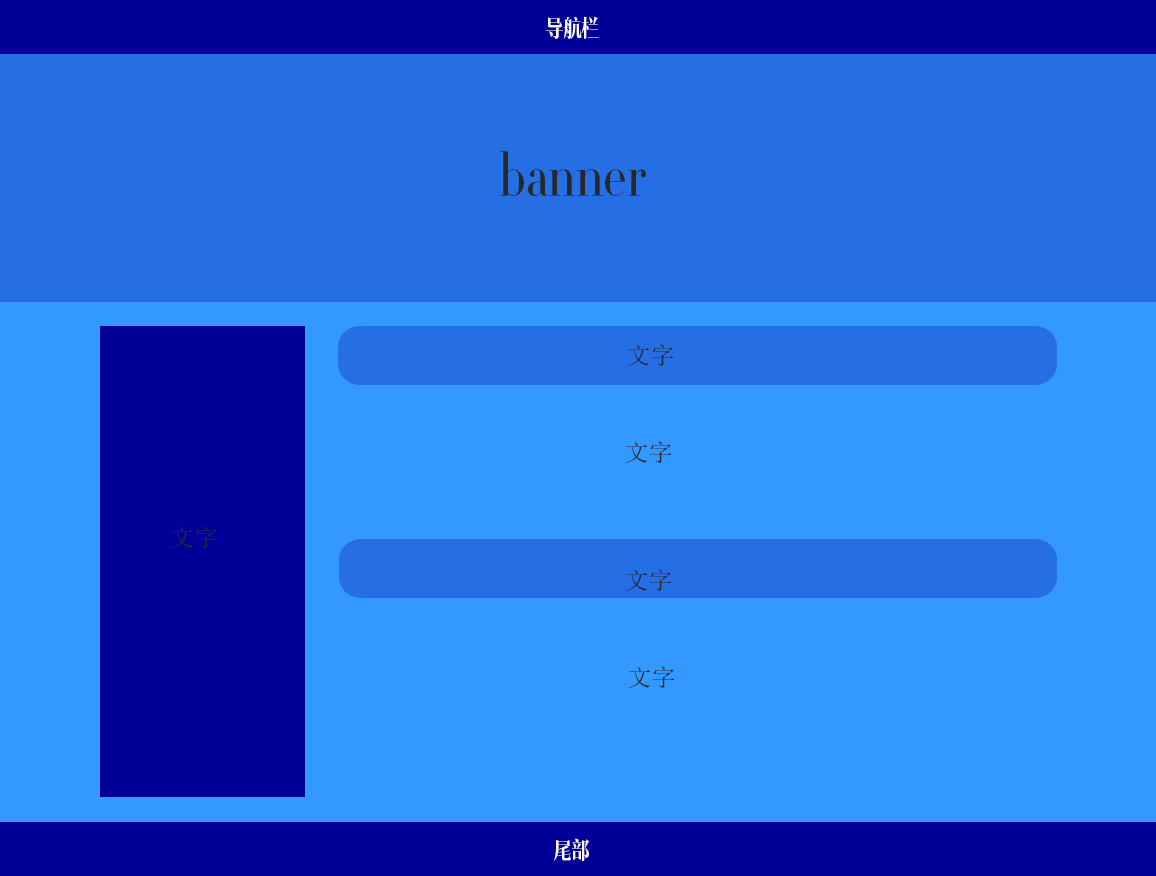
<style>
.page{position:relative;width:1156px;height:876px;background:#3399fe}
.page>*{position:absolute;margin:0}
.t1{font:24px "RTWSJyunYaDemo-Regular";color:#fdf9f2}
.t2{font:60px "RTWSJyunYaDemo-Regular";color:#282828}
.t3{font:24px "SimSun";color:#282828}
</style>
<div class="page">
<p class="t1" style="left:546px;top:16px;width:53px;height:23px">导航栏</p>
<p class="t2" style="left:500px;top:151px;width:146px;height:45px">banner</p>
<p class="t3" style="left:627px;top:344px;width:47px;height:22px">文字</p>
<p class="t3" style="left:625px;top:441px;width:47px;height:22px">文字</p>
<p class="t3" style="left:171px;top:526px;width:46px;height:22px">文字</p>
<p class="t3" style="left:625px;top:569px;width:47px;height:22px">文字</p>
<p class="t3" style="left:628px;top:666px;width:47px;height:22px">文字</p>
<p class="t1" style="left:554px;top:838px;width:35px;height:24px">尾部</p>
</div>
